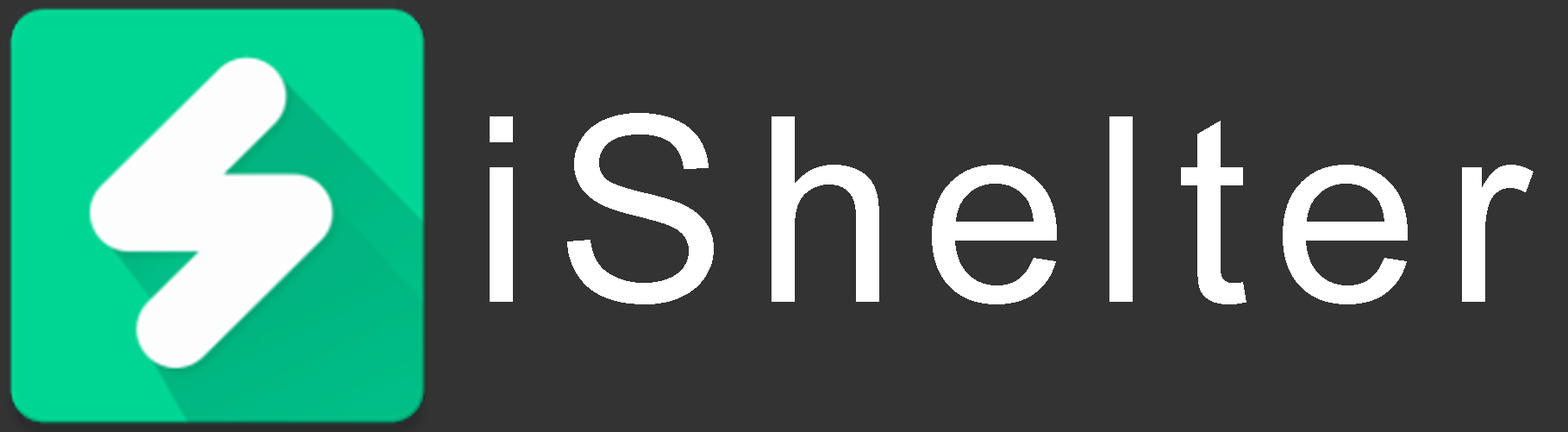
<style>
.page{position:relative;width:1568px;height:432px;background:#333333}
.page>*{position:absolute;margin:0}
.t1{font:258.8px "ArialMT";letter-spacing:0.1em;color:#ffffff}
</style>
<div class="page">
<p class="t1" style="left:490px;top:113px;width:1044px;height:191px">iShelter</p>
</div>
